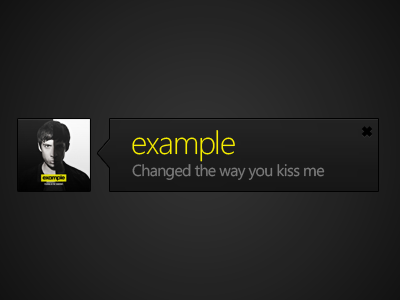
<style>
.page{position:relative;width:400px;height:300px}
.page>*{position:absolute;margin:0}
.t1{font:32px "SegoeWP-Light";letter-spacing:-0.04em;color:#f6ed00}
.t2{font:16px "SegoeWP";letter-spacing:-0.04em;color:#7f7f7f}
</style>
<div class="page">
<p class="t1" style="left:132px;top:130px;width:103px;height:32px">example</p>
<p class="t2" style="left:132px;top:164px;width:193px;height:16px">Changed the way you kiss me</p>
</div>
